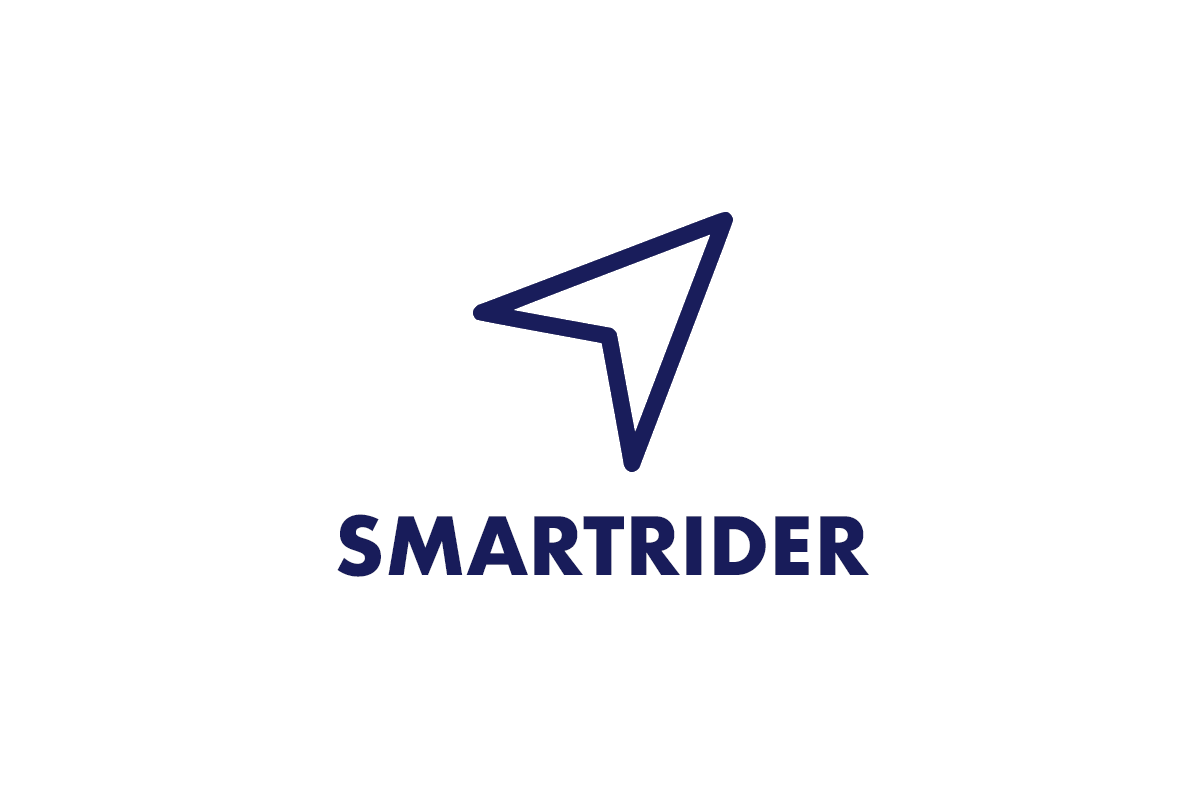
<style>
.page{position:relative;width:1200px;height:800px;background:#ffffff}
.page>*{position:absolute;margin:0}
.t1{font:78px "Futura-Bold";color:#181c5a}
</style>
<div class="page">
<p class="t1" style="left:337px;top:514px;width:532px;height:63px">SMARTRIDER</p>
</div>
